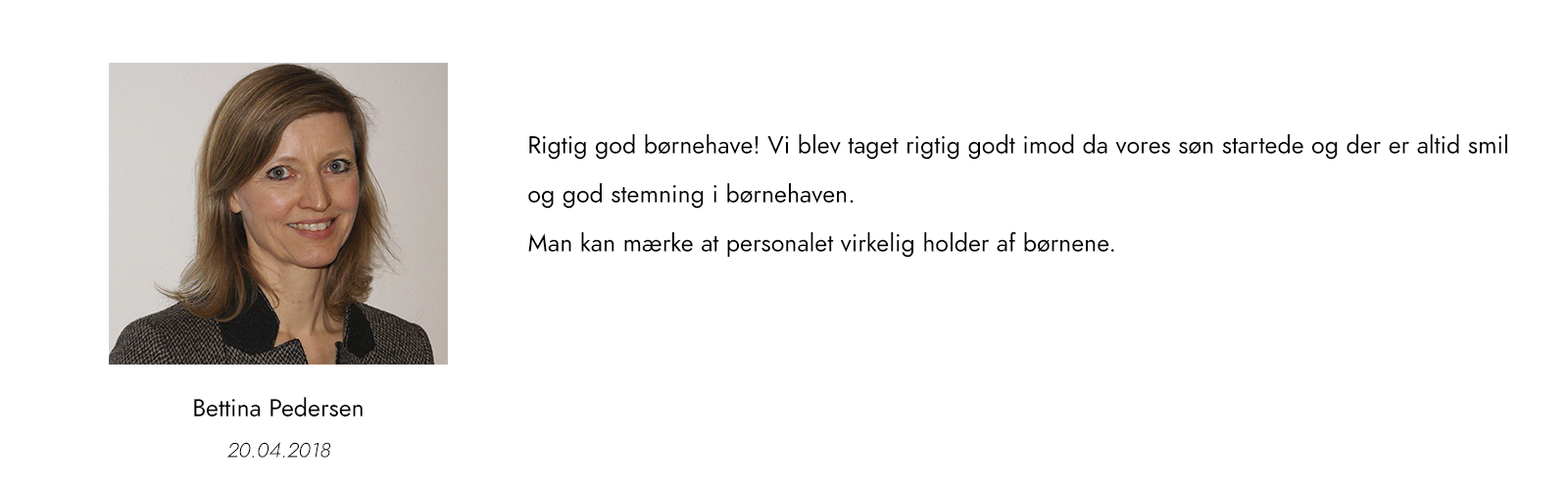
<style>
.page{position:relative;width:1568px;height:490px;background:#ffffff}
.page>*{position:absolute;margin:0}
.t1{font:24.5px/49px "Renner-it-Book";color:#000000}
.t2{font:24.5px/20.4px "Renner-it-Book";color:#000000}
.t3{font:20.4px/20.4px "Renner-it-LightItalic";color:#000000}
</style>
<div class="page">
<p class="t1" style="left:528px;top:134px;width:979px;height:124px">Rigtig god børnehave! Vi blev taget rigtig godt imod da vores søn startede og der er altid smil og god stemning i børnehaven. <br>Man kan mærke at personalet virkelig holder af børnene.</p>
<p class="t2" style="left:194px;top:397px;width:169px;height:61px;text-align:center">Bettina Pedersen <br><br><span class="t3">20.04.2018</span></p>
</div>
